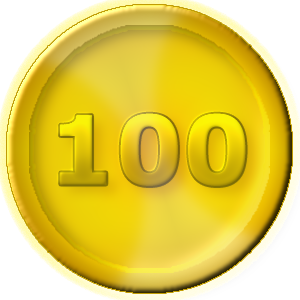
<style>
.page{position:relative;width:300px;height:300px}
.page>*{position:absolute;margin:0}
.t1{font:95.2px "Verdana-Bold";color:#a98f02}
</style>
<div class="page">
<p class="t1" style="left:60px;top:113px;width:186px;height:73px;opacity:0.74">100</p>
</div>
